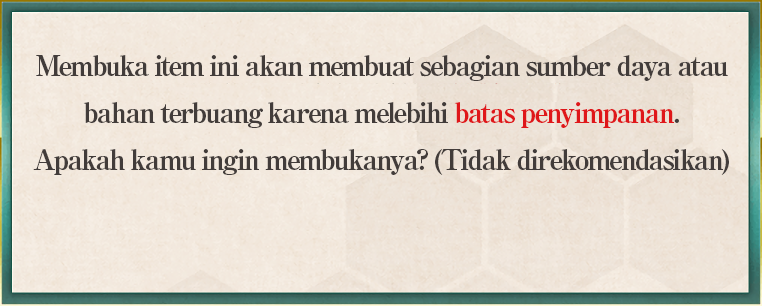
<style>
.page{position:relative;width:762px;height:306px}
.page>*{position:absolute;margin:0}
.t1{font:28px/47px "RyuminPro-ExBold";letter-spacing:-0.08em;color:#423c3a}
.t2{font:28px/47px "RyuminPro-ExBold";letter-spacing:-0.08em;color:#df171a}
</style>
<div class="page">
<p class="t1" style="left:33px;top:55px;width:696px;height:120px;text-align:center">Membuka item ini akan membuat sebagian sumber daya atau<br>bahan terbuang karena melebihi <span class="t2">batas penyimpanan</span>.<br>Apakah kamu ingin membukanya? (Tidak direkomendasikan)</p>
</div>
